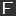
<style>
.page{position:relative;width:16px;height:16px;background:#333333}
.page>*{position:absolute;margin:0}
.t1{font:18px "SweetSans-ThinSC";color:#ffffff;font-weight:bold}
</style>
<div class="page">
<p class="t1" style="left:3px;top:2px;width:10px;height:12px">F</p>
</div>
